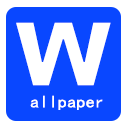
<style>
.page{position:relative;width:128px;height:128px;background:#0947ff}
.page>*{position:absolute;margin:0}
.t1{font:92.3px "SimHei";color:#ffffff;scale:2.14 1}
.t2{font:17.2px "SimHei";color:#ffffff;scale:1.08 1}
</style>
<div class="page">
<p class="t1" style="left:16px;top:22px;width:95px;height:64px">W</p>
<p class="t2" style="left:30px;top:95px;width:73px;height:15px">allpaper</p>
</div>
